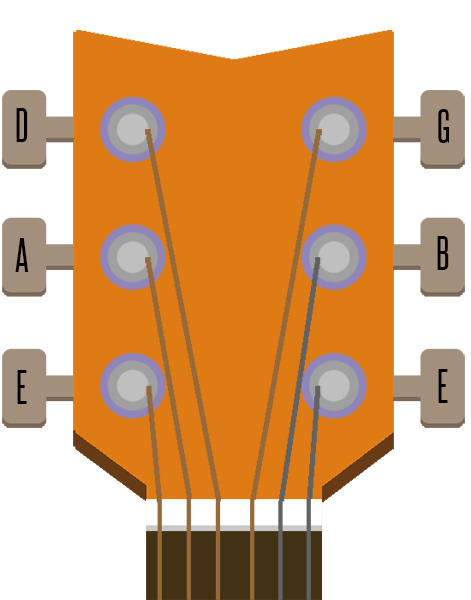
<style>
.page{position:relative;width:471px;height:600px;background:#df7b15}
.page>*{position:absolute;margin:0}
.t1{font:41.1px "Steelfish-Regular";color:#000000}
</style>
<div class="page">
<p class="t1" style="left:16px;top:108px;width:12px;height:34px">D</p>
<p class="t1" style="left:438px;top:109px;width:11px;height:34px">G</p>
<p class="t1" style="left:15px;top:238px;width:14px;height:34px">A</p>
<p class="t1" style="left:437px;top:236px;width:12px;height:34px">B</p>
<p class="t1" style="left:17px;top:370px;width:10px;height:34px">E</p>
<p class="t1" style="left:438px;top:369px;width:10px;height:34px">E</p>
</div>
